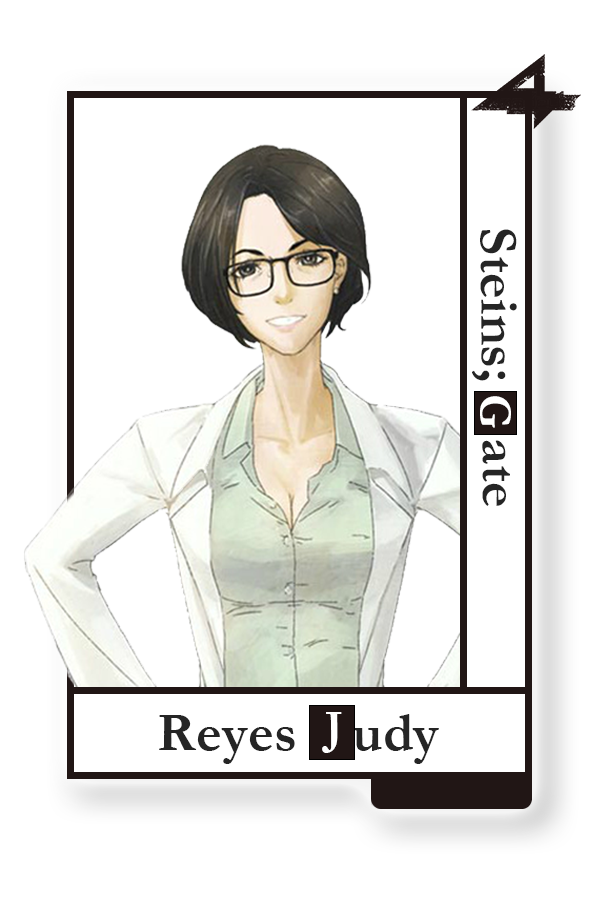
<style>
.page{position:relative;width:600px;height:900px;background:#ffffff}
.page>*{position:absolute;margin:0}
.t1{font:55.4px "Garamond-Bold";color:#252525}
.t2{font:47px "Garamond-Bold";color:#ffffff}
</style>
<div class="page">
<p class="t1" style="left:472px;top:229px;width:45px;height:277px;rotate:89deg">Steins;    ate</p>
<p class="t2" style="left:480px;top:396px;width:31px;height:32px;rotate:90deg">G</p>
<p class="t2" style="left:322px;top:712px;width:20px;height:41px">J</p>
<p class="t1" style="left:159px;top:714px;width:280px;height:50px">Reyes    udy</p>
</div>
